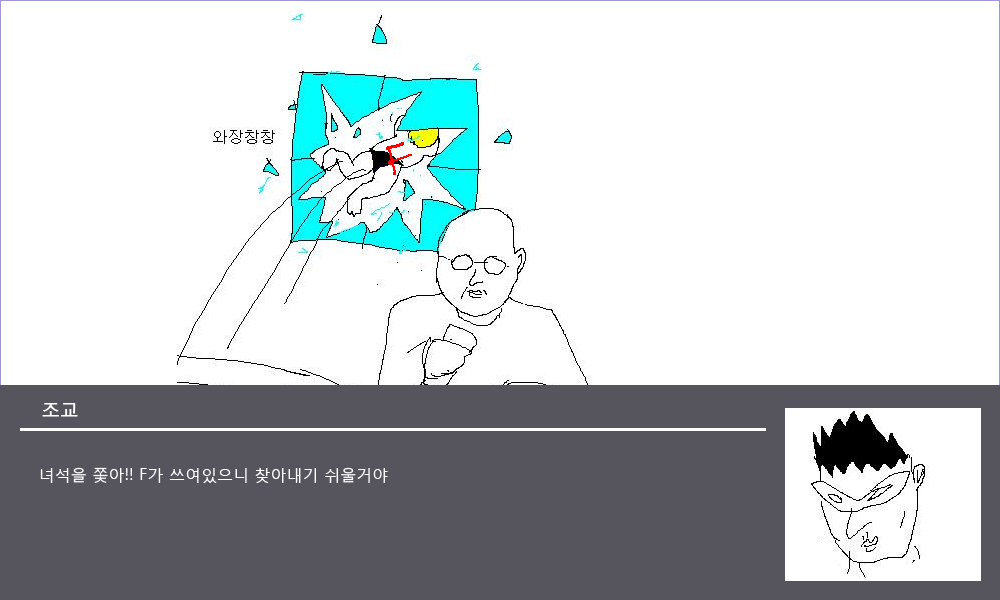
<style>
.page{position:relative;width:1000px;height:600px;background:#ffffff}
.page>*{position:absolute;margin:0}
.t1{font:18px "MalgunGothicRegular";letter-spacing:-0.01em;color:#ffffff;font-weight:bold}
.t2{font:16px "MalgunGothicRegular";color:#ffffff}
</style>
<div class="page">
<p class="t1" style="left:42px;top:403px;width:36px;height:14px">조교</p>
<p class="t2" style="left:40px;top:467px;width:348px;height:16px">녀석을 쫓아!! F가 쓰여있으니 찾아내기 쉬울거야</p>
</div>
